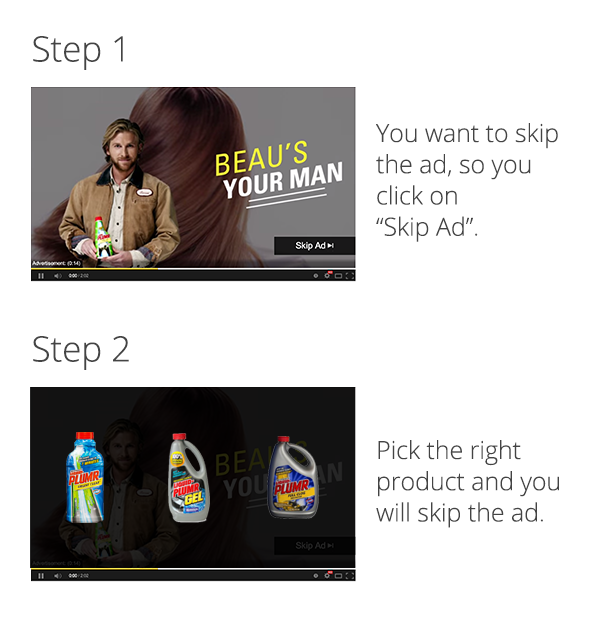
<style>
.page{position:relative;width:600px;height:636px;background:#ffffff}
.page>*{position:absolute;margin:0}
.t1{font:35px "OpenSans-Light";letter-spacing:-0.002em;color:#444444}
.t2{font:25px/31.2px "OpenSans-Light";letter-spacing:-0.002em;color:#444444}
</style>
<div class="page">
<p class="t1" style="left:33px;top:36px;width:90px;height:34px">Step 1</p>
<p class="t2" style="left:376px;top:123px;width:182px;height:119px">You want to skip the ad, so you click on<br>“Skip Ad”.</p>
<p class="t1" style="left:33px;top:336px;width:96px;height:34px">Step 2</p>
<p class="t2" style="left:376px;top:440px;width:183px;height:88px">Pick the right product and you will skip the ad.</p>
</div>
